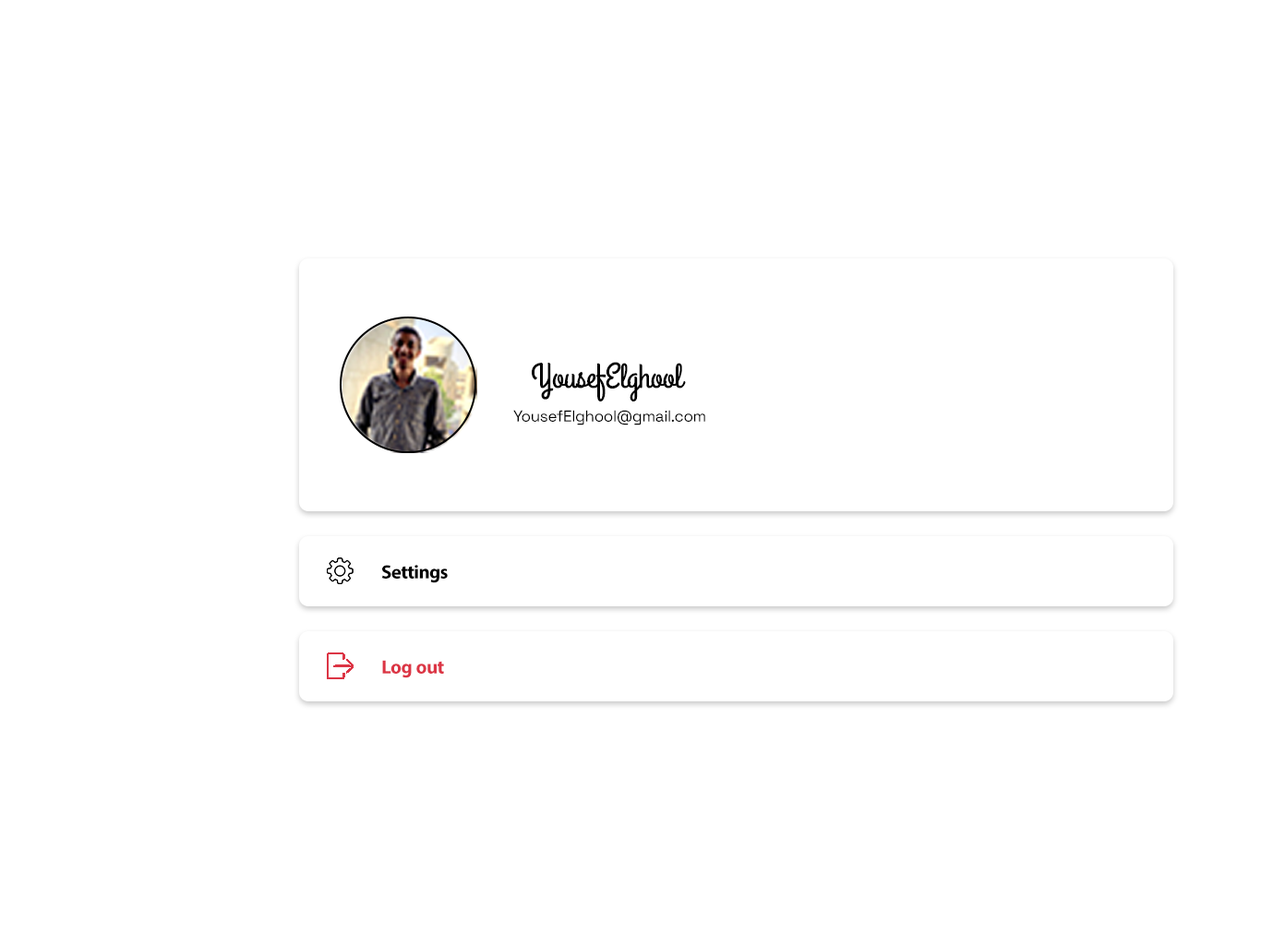
<style>
.page{position:relative;width:1261px;height:945px;background:#ffffff}
.page>*{position:absolute;margin:0}
.t1{font:34.9px "GrandHotel-Regular";letter-spacing:-0.02em;color:#000000}
.t2{font:15.7px "SpaceGrotesk-Regular";letter-spacing:-0.02em;color:#000000}
.t3{font:26.9px "MyriadArabic-Bold";letter-spacing:-0.02em;color:#000000}
.t4{font:26.9px "MyriadArabic-Bold";letter-spacing:-0.02em;color:#dc3545}
</style>
<div class="page">
<p class="t1" style="left:532px;top:362px;width:154px;height:40px">YousefElghool</p>
<p class="t2" style="left:513px;top:410px;width:192px;height:16px">YousefElghool@gmail.com</p>
<p class="t3" style="left:381px;top:565px;width:67px;height:19px">Settings</p>
<p class="t4" style="left:382px;top:660px;width:62px;height:19px">Log out</p>
</div>
